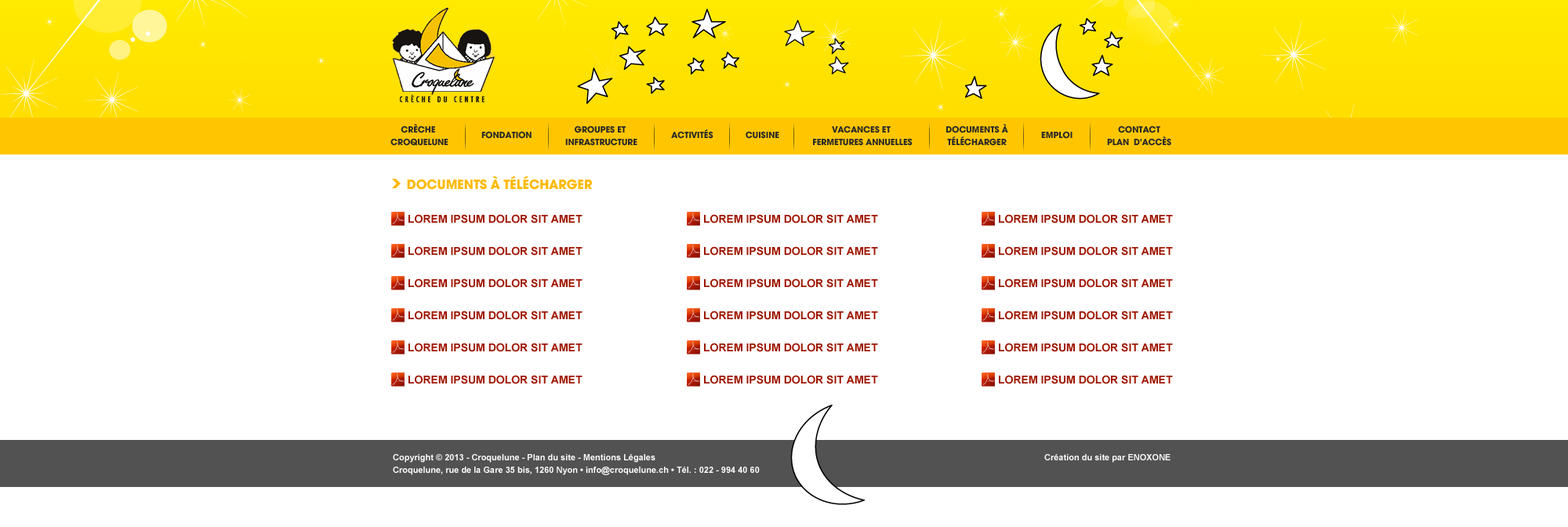
<style>
.page{position:relative;width:1568px;height:527px;background:#ffffff}
.page>*{position:absolute;margin:0}
.t1{font:9.4px/12.7px "AvantGard-Bold";color:#2a2a2a;text-transform:uppercase}
.t2{font:9.4px "AvantGard-Bold";color:#2a2a2a;text-transform:uppercase}
.t3{font:14.1px "AvantGard-Bold";color:#ffb900;text-transform:uppercase}
.t4{font:11px "Arial-BoldMT";color:#9f1600;text-transform:uppercase}
.t5{font:8.6px/12.7px "Arial-BoldMT";color:#ffffff}
</style>
<div class="page">
<p class="t1" style="left:390px;top:123px;width:58px;height:23px;text-align:center">Crèche <br>Croquelune</p>
<p class="t1" style="left:565px;top:125px;width:72px;height:21px;text-align:center">Groupes et <br>infrastructure</p>
<p class="t1" style="left:813px;top:125px;width:100px;height:21px;text-align:center">Vacances et <br>fermetures annuelles</p>
<p class="t1" style="left:946px;top:124px;width:62px;height:22px;text-align:center">DOCUMENTs à<br>télécharger</p>
<p class="t1" style="left:1107px;top:125px;width:64px;height:21px;text-align:center">Contact<br>Plan  d'accès</p>
<p class="t2" style="left:481px;top:131px;width:51px;height:8px">Fondation</p>
<p class="t2" style="left:671px;top:129px;width:42px;height:10px">ACTIVITés</p>
<p class="t2" style="left:746px;top:131px;width:33px;height:8px">Cuisine</p>
<p class="t2" style="left:1041px;top:131px;width:32px;height:8px">Emploi</p>
<p class="t3" style="left:407px;top:176px;width:186px;height:14px">documents à télécharger</p>
<p class="t4" style="left:408px;top:214px;width:175px;height:9px">Lorem ipsum dolor sit amet</p>
<p class="t4" style="left:704px;top:214px;width:174px;height:9px">Lorem ipsum dolor sit amet</p>
<p class="t4" style="left:999px;top:214px;width:174px;height:9px">Lorem ipsum dolor sit amet</p>
<p class="t4" style="left:408px;top:246px;width:175px;height:10px">Lorem ipsum dolor sit amet</p>
<p class="t4" style="left:704px;top:246px;width:174px;height:10px">Lorem ipsum dolor sit amet</p>
<p class="t4" style="left:999px;top:246px;width:174px;height:10px">Lorem ipsum dolor sit amet</p>
<p class="t4" style="left:408px;top:278px;width:175px;height:10px">Lorem ipsum dolor sit amet</p>
<p class="t4" style="left:704px;top:278px;width:174px;height:10px">Lorem ipsum dolor sit amet</p>
<p class="t4" style="left:999px;top:278px;width:174px;height:10px">Lorem ipsum dolor sit amet</p>
<p class="t4" style="left:408px;top:310px;width:175px;height:10px">Lorem ipsum dolor sit amet</p>
<p class="t4" style="left:704px;top:310px;width:174px;height:10px">Lorem ipsum dolor sit amet</p>
<p class="t4" style="left:999px;top:310px;width:174px;height:10px">Lorem ipsum dolor sit amet</p>
<p class="t4" style="left:408px;top:343px;width:175px;height:9px">Lorem ipsum dolor sit amet</p>
<p class="t4" style="left:704px;top:343px;width:174px;height:9px">Lorem ipsum dolor sit amet</p>
<p class="t4" style="left:999px;top:343px;width:174px;height:9px">Lorem ipsum dolor sit amet</p>
<p class="t4" style="left:408px;top:375px;width:175px;height:9px">Lorem ipsum dolor sit amet</p>
<p class="t4" style="left:704px;top:375px;width:174px;height:9px">Lorem ipsum dolor sit amet</p>
<p class="t4" style="left:999px;top:375px;width:174px;height:9px">Lorem ipsum dolor sit amet</p>
<p class="t5" style="left:393px;top:454px;width:778px;height:21px">Copyright © 2013 - Croquelune - Plan du site - Mentions Légales                                                             Création du site par ENOXONE<br>Croquelune, rue de la Gare 35 bis, 1260 Nyon • info@croquelune.ch • Tél. : 022 - 994 40 60</p>
</div>
